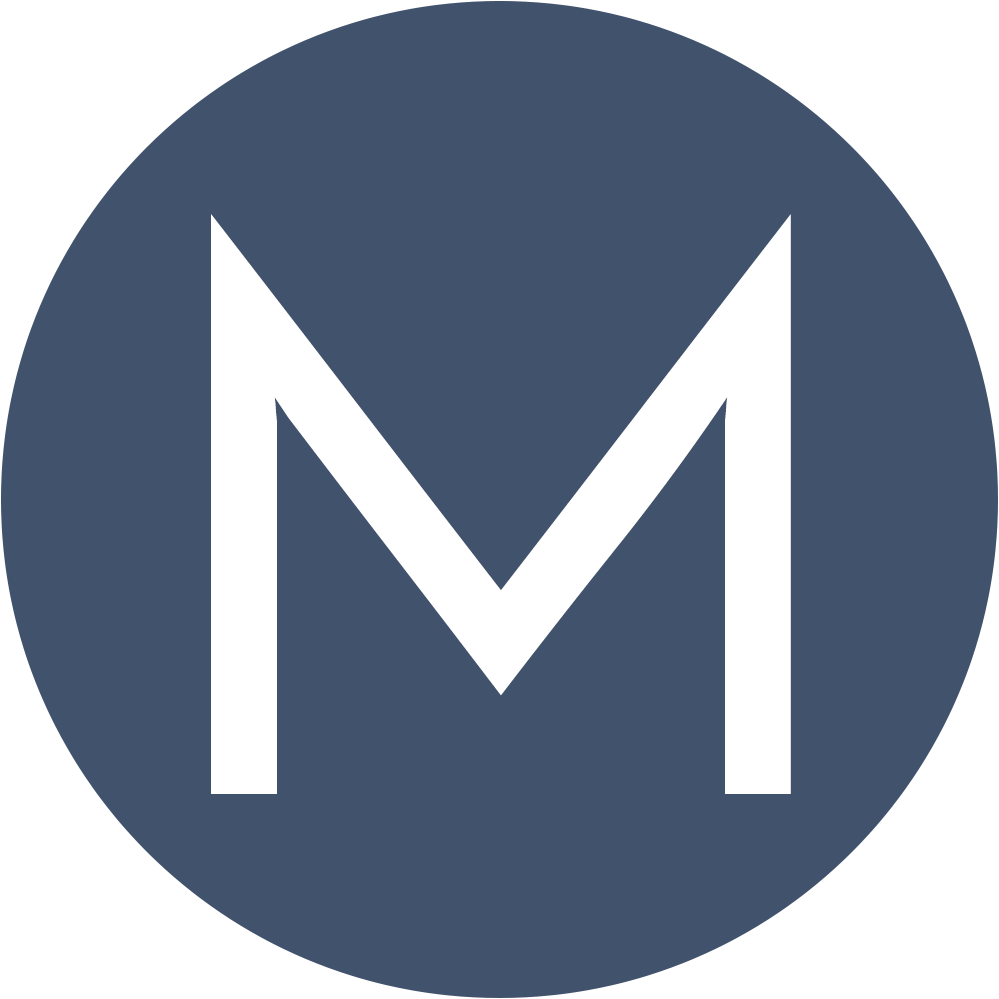
<style>
.page{position:relative;width:999px;height:999px;background:#41526d}
.page>*{position:absolute;margin:0}
.t1{font:791.7px "JosefinSans-Bold";color:#ffffff}
</style>
<div class="page">
<p class="t1" style="left:211px;top:214px;width:580px;height:580px">M</p>
</div>
